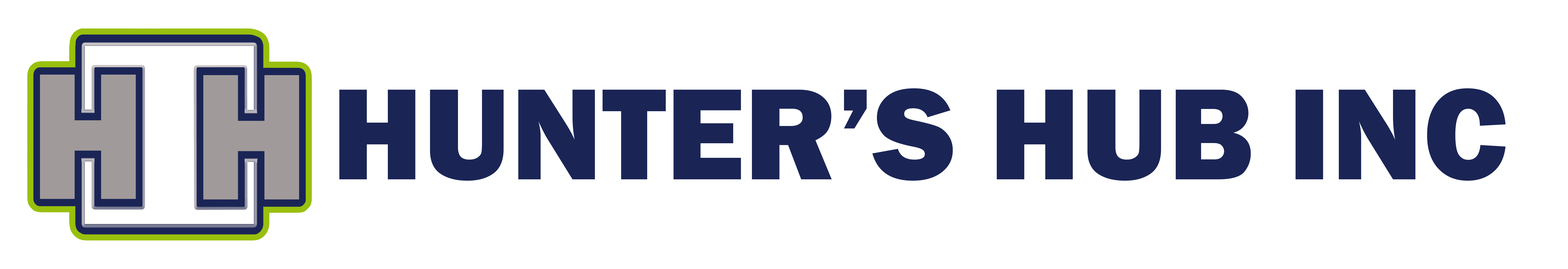
<style>
.page{position:relative;width:1568px;height:269px;background:#ffffff}
.page>*{position:absolute;margin:0}
.t1{font:134.4px "FranklinGothic-Heavy";color:#1a2556}
</style>
<div class="page">
<p class="t1" style="left:339px;top:88px;width:1167px;height:93px">HUNTER’S HUB INC</p>
</div>
